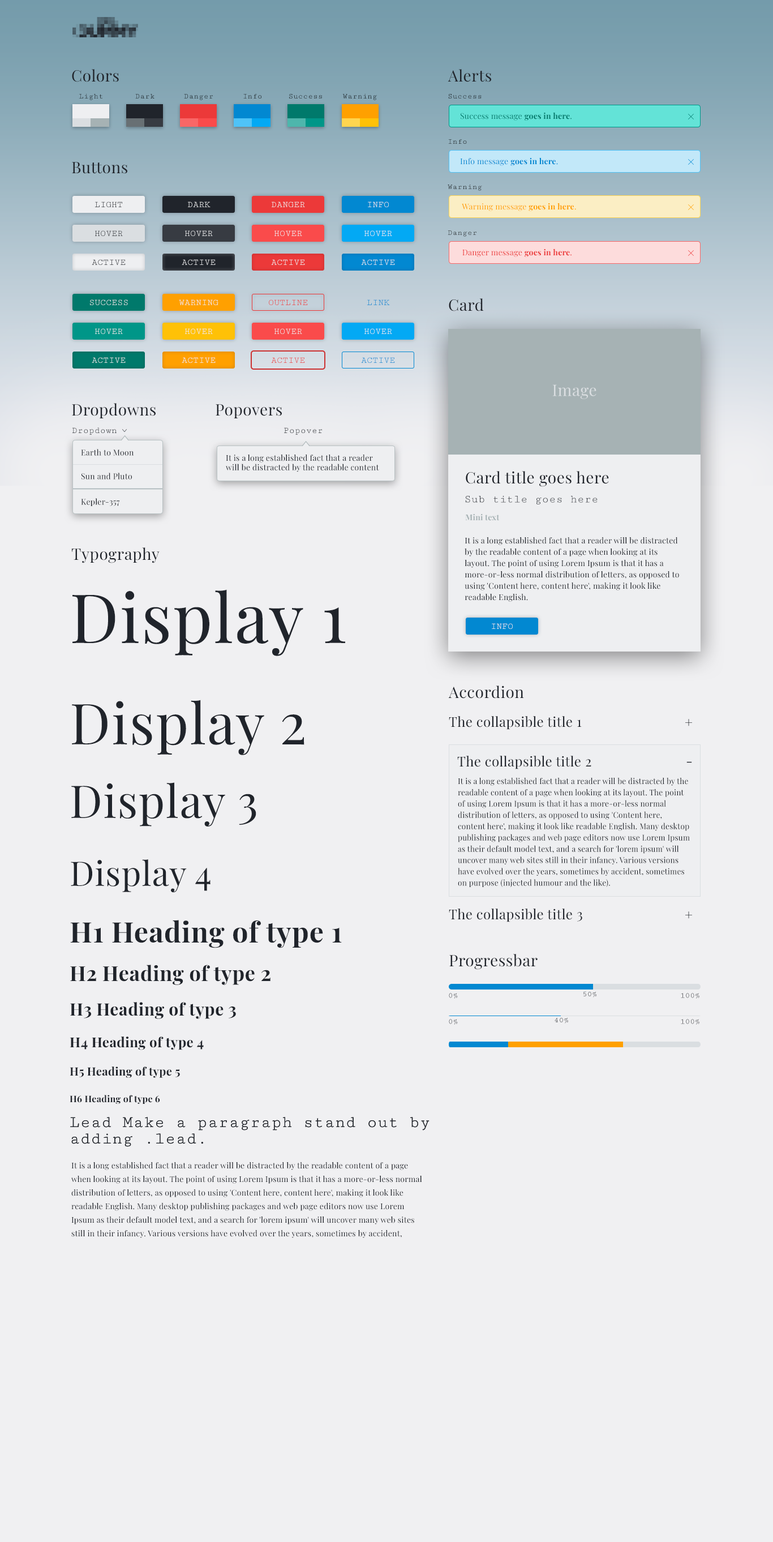
<style>
.page{position:relative;width:773px;height:1542px;background:#f0f0f2}
.page>*{position:absolute;margin:0}
.t1{font:15.9px "PlayfairDisplay-Regular";letter-spacing:0.02em;color:#20242b}
.t2{font:7.9px "CutiveMono-Regular";letter-spacing:0.02em}
.t3{font:7.9px "PlayfairDisplay-Regular";letter-spacing:0.02em;color:#00796b}
.t4{font:7.9px "PlayfairDisplay-Bold";letter-spacing:0.02em;color:#00796b}
.t5{font:7.9px "PlayfairDisplay-Regular";letter-spacing:0.02em;color:#0288d1}
.t6{font:7.9px "PlayfairDisplay-Bold";letter-spacing:0.02em;color:#0288d1}
.t7{font:9.1px "CutiveMono-Regular";letter-spacing:0.02em}
.t8{font:9.1px "CutiveMono-Regular";letter-spacing:0.02em;color:#eeeff1}
.t9{font:7.9px "PlayfairDisplay-Regular";letter-spacing:0.02em;color:#ffa000}
.t10{font:7.9px "PlayfairDisplay-Bold";letter-spacing:0.02em;color:#ffa000}
.t11{font:7.9px "PlayfairDisplay-Regular";letter-spacing:0.02em;color:#ec3939}
.t12{font:7.9px "PlayfairDisplay-Bold";letter-spacing:0.02em;color:#ec3939}
.t13{font:9.1px "CutiveMono-Regular";letter-spacing:0.02em;color:#20242b}
.t14{font:9.1px "CutiveMono-Regular";letter-spacing:0.02em;color:#ec3939}
.t15{font:9.1px "CutiveMono-Regular";letter-spacing:0.02em;color:#0288d1}
.t16{font:15.9px "PlayfairDisplay-Regular";letter-spacing:0.02em;color:#dadee1}
.t17{font:7.9px "PlayfairDisplay-Regular";letter-spacing:0.02em;color:#20242b}
.t18{font:11.3px "CutiveMono-Regular";letter-spacing:0.02em;color:#373b42}
.t19{font:7.9px "PlayfairDisplay-Bold";letter-spacing:0.02em;color:#a6b2b4}
.t20{font:7.9px/11.3px "PlayfairDisplay-Regular";letter-spacing:0.02em;color:#20242b}
.t21{font:67.9px "PlayfairDisplay-Regular";letter-spacing:0.02em;color:#20242b}
.t22{font:56.6px "PlayfairDisplay-Regular";letter-spacing:0.02em;color:#20242b}
.t23{font:13.6px "PlayfairDisplay-Regular";letter-spacing:0.02em;color:#20242b}
.t24{font:13.6px "PlayfairDisplay-Regular";letter-spacing:0.02em}
.t25{font:45.3px "PlayfairDisplay-Regular";letter-spacing:0.02em;color:#20242b}
.t26{font:34px "PlayfairDisplay-Regular";letter-spacing:0.02em;color:#20242b}
.t27{font:28.3px "PlayfairDisplay-Bold";letter-spacing:0.02em;color:#20242b}
.t28{font:20.4px "PlayfairDisplay-Bold";letter-spacing:0.02em;color:#20242b}
.t29{font:17px "PlayfairDisplay-Bold";letter-spacing:0.02em;color:#20242b}
.t30{font:13.6px "PlayfairDisplay-Bold";letter-spacing:0.02em;color:#20242b}
.t31{font:11.3px "PlayfairDisplay-Bold";letter-spacing:0.02em;color:#20242b}
.t32{font:9.1px "PlayfairDisplay-Bold";letter-spacing:0.02em;color:#20242b}
.t33{font:17px/13.6px "CutiveMono-Regular";letter-spacing:0.02em;color:#20242b}
.t34{font:7.9px/13.6px "PlayfairDisplay-Regular";letter-spacing:0.02em;color:#20242b}
</style>
<div class="page">
<p class="t1" style="left:72px;top:69px;width:47px;height:13px">Colors</p>
<p class="t1" style="left:448px;top:69px;width:43px;height:13px">Alerts</p>
<p class="t2" style="left:79px;top:94px;width:23px;height:6px">Light</p>
<p class="t2" style="left:135px;top:94px;width:20px;height:5px">Dark</p>
<p class="t2" style="left:184px;top:94px;width:29px;height:6px">Danger</p>
<p class="t2" style="left:243px;top:94px;width:19px;height:5px">Info</p>
<p class="t2" style="left:289px;top:94px;width:33px;height:5px">Success</p>
<p class="t2" style="left:342px;top:94px;width:35px;height:6px">Warning</p>
<p class="t2" style="left:448px;top:94px;width:34px;height:5px">Success</p>
<p class="t3" style="left:461px;top:112px;width:111px;height:9px">Success message <span class="t4">goes in here</span>.</p>
<p class="t2" style="left:448px;top:139px;width:19px;height:5px">Info</p>
<p class="t1" style="left:72px;top:162px;width:55px;height:12px">Buttons</p>
<p class="t5" style="left:460px;top:157px;width:98px;height:9px">Info message <span class="t6">goes in here</span>.</p>
<p class="t2" style="left:448px;top:185px;width:34px;height:6px">Warning</p>
<p class="t7" style="left:95px;top:202px;width:27px;height:6px">LIGHT</p>
<p class="t8" style="left:188px;top:202px;width:23px;height:5px">DARK</p>
<p class="t8" style="left:272px;top:202px;width:33px;height:6px">DANGER</p>
<p class="t8" style="left:368px;top:202px;width:21px;height:6px">INFO</p>
<p class="t9" style="left:462px;top:203px;width:114px;height:8px">Warning message <span class="t10">goes in here</span>.</p>
<p class="t7" style="left:95px;top:230px;width:28px;height:7px">HOVER</p>
<p class="t8" style="left:185px;top:230px;width:28px;height:7px">HOVER</p>
<p class="t8" style="left:275px;top:230px;width:27px;height:7px">HOVER</p>
<p class="t8" style="left:365px;top:230px;width:27px;height:7px">HOVER</p>
<p class="t2" style="left:448px;top:230px;width:29px;height:7px">Danger</p>
<p class="t11" style="left:462px;top:249px;width:110px;height:8px">Danger message <span class="t12">goes in here</span>.</p>
<p class="t13" style="left:92px;top:259px;width:34px;height:6px">ACTIVE</p>
<p class="t8" style="left:182px;top:259px;width:34px;height:6px">ACTIVE</p>
<p class="t8" style="left:271px;top:259px;width:34px;height:6px">ACTIVE</p>
<p class="t8" style="left:361px;top:259px;width:34px;height:6px">ACTIVE</p>
<p class="t8" style="left:90px;top:299px;width:38px;height:7px">SUCCESS</p>
<p class="t8" style="left:179px;top:299px;width:40px;height:7px">WARNING</p>
<p class="t14" style="left:269px;top:299px;width:39px;height:7px">OUTLINE</p>
<p class="t15" style="left:367px;top:299px;width:23px;height:7px">LINK</p>
<p class="t1" style="left:449px;top:298px;width:35px;height:13px">Card</p>
<p class="t8" style="left:95px;top:328px;width:28px;height:7px">HOVER</p>
<p class="t8" style="left:185px;top:328px;width:28px;height:7px">HOVER</p>
<p class="t8" style="left:275px;top:328px;width:27px;height:7px">HOVER</p>
<p class="t8" style="left:365px;top:328px;width:27px;height:7px">HOVER</p>
<p class="t8" style="left:92px;top:357px;width:34px;height:6px">ACTIVE</p>
<p class="t8" style="left:182px;top:357px;width:34px;height:6px">ACTIVE</p>
<p class="t14" style="left:271px;top:357px;width:34px;height:6px">ACTIVE</p>
<p class="t15" style="left:361px;top:357px;width:34px;height:6px">ACTIVE</p>
<p class="t16" style="left:553px;top:384px;width:44px;height:15px">Image</p>
<p class="t1" style="left:72px;top:403px;width:84px;height:15px">Dropdowns</p>
<p class="t1" style="left:216px;top:404px;width:66px;height:14px">Popovers</p>
<p class="t7" style="left:72px;top:427px;width:45px;height:8px">Dropdown</p>
<p class="t7" style="left:284px;top:427px;width:38px;height:8px">Popover</p>
<p class="t17" style="left:81px;top:449px;width:53px;height:7px">Earth to Moon</p>
<p class="t17" style="left:226px;top:454px;width:153px;height:18px">It is a long established fact that a reader will be distracted by the readable content</p>
<p class="t17" style="left:82px;top:473px;width:50px;height:6px">Sun and Pluto</p>
<p class="t1" style="left:466px;top:471px;width:143px;height:16px">Card title goes here</p>
<p class="t18" style="left:465px;top:495px;width:133px;height:9px">Sub title goes here</p>
<p class="t17" style="left:81px;top:498px;width:39px;height:8px">Kepler-357</p>
<p class="t19" style="left:465px;top:514px;width:35px;height:7px">Mini text</p>
<p class="t20" style="left:465px;top:537px;width:214px;height:65px">It is a long established fact that a reader will be distracted by the readable content of a page when looking at its layout. The point of using Lorem Ipsum is that it has a more-or-less normal distribution of letters, as opposed to using 'Content here, content here', making it look like readable English.</p>
<p class="t1" style="left:71px;top:547px;width:89px;height:16px">Typography</p>
<p class="t21" style="left:72px;top:589px;width:273px;height:67px">Display 1</p>
<p class="t8" style="left:492px;top:623px;width:21px;height:6px">INFO</p>
<p class="t1" style="left:448px;top:686px;width:76px;height:13px">Accordion</p>
<p class="t22" style="left:72px;top:700px;width:233px;height:55px">Display 2</p>
<p class="t23" style="left:449px;top:716px;width:133px;height:14px">The collapsible title 1</p>
<p class="t24" style="left:686px;top:719px;width:6px;height:7px">+</p>
<p class="t23" style="left:457px;top:756px;width:135px;height:13px">The collapsible title 2</p>
<p class="t23" style="left:687px;top:761px;width:5px;height:2px">-</p>
<p class="t25" style="left:71px;top:782px;width:185px;height:44px">Display 3</p>
<p class="t20" style="left:458px;top:777px;width:232px;height:110px">It is a long established fact that a reader will be distracted by the readable content of a page when looking at its layout. The point of using Lorem Ipsum is that it has a more-or-less normal distribution of letters, as opposed to using 'Content here, content here', making it look like readable English. Many desktop publishing packages and web page editors now use Lorem Ipsum as their default model text, and a search for 'lorem ipsum' will uncover many web sites still in their infancy. Various versions have evolved over the years, sometimes by accident, sometimes on purpose (injected humour and the like).</p>
<p class="t26" style="left:71px;top:859px;width:140px;height:34px">Display 4</p>
<p class="t23" style="left:449px;top:909px;width:134px;height:13px">The collapsible title 3</p>
<p class="t24" style="left:686px;top:911px;width:6px;height:8px">+</p>
<p class="t27" style="left:70px;top:920px;width:272px;height:28px">H1 Heading of type 1</p>
<p class="t1" style="left:449px;top:954px;width:89px;height:16px">Progressbar</p>
<p class="t28" style="left:70px;top:965px;width:201px;height:20px">H2 Heading of type 2</p>
<p class="t29" style="left:70px;top:1002px;width:166px;height:17px">H3 Heading of type 3</p>
<p class="t2" style="left:449px;top:993px;width:9px;height:6px">0%</p>
<p class="t2" style="left:584px;top:991px;width:13px;height:6px">50%</p>
<p class="t2" style="left:681px;top:993px;width:19px;height:6px">100%</p>
<p class="t2" style="left:449px;top:1019px;width:9px;height:6px">0%</p>
<p class="t2" style="left:555px;top:1018px;width:13px;height:5px">40%</p>
<p class="t2" style="left:681px;top:1019px;width:19px;height:6px">100%</p>
<p class="t30" style="left:70px;top:1037px;width:134px;height:13px">H4 Heading of type 4</p>
<p class="t31" style="left:70px;top:1067px;width:110px;height:11px">H5 Heading of type 5</p>
<p class="t32" style="left:70px;top:1095px;width:90px;height:9px">H6 Heading of type 6</p>
<p class="t33" style="left:70px;top:1117px;width:360px;height:30px">Lead Make a paragraph stand out by<br>adding .lead.</p>
<p class="t33" style="left:70px;top:1117px;width:360px;height:30px">Lead Make a paragraph stand out by<br>adding .lead.</p>
<p class="t34" style="left:71px;top:1162px;width:351px;height:76px">It is a long established fact that a reader will be distracted by the readable content of a page when looking at its layout. The point of using Lorem Ipsum is that it has a more-or-less normal distribution of letters, as opposed to using 'Content here, content here', making it look like readable English. Many desktop publishing packages and web page editors now use Lorem Ipsum as their default model text, and a search for 'lorem ipsum' will uncover many web sites still in their infancy. Various versions have evolved over the years, sometimes by accident, sometimes on purpose (injected humour and the like).</p>
</div>
